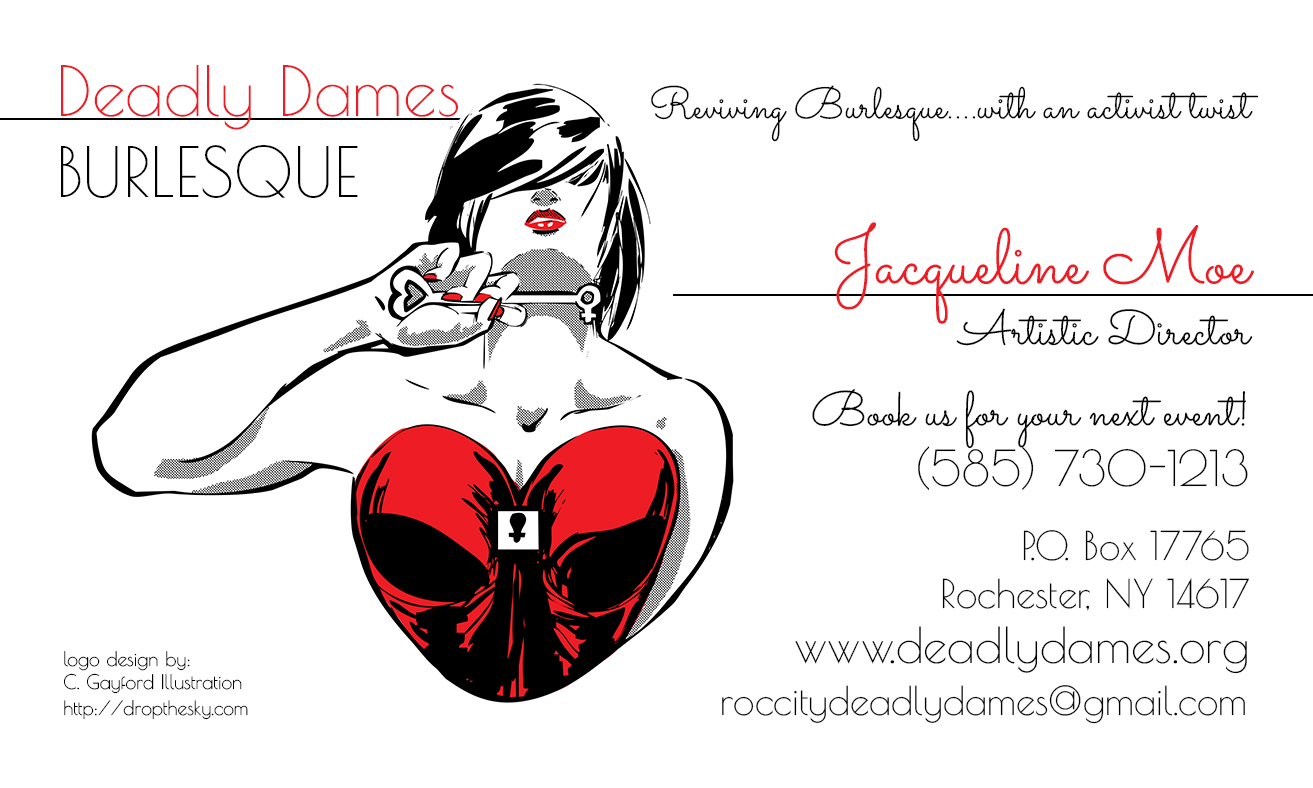
<style>
.page{position:relative;width:1313px;height:788px;background:#ffffff}
.page>*{position:absolute;margin:0}
.t1{font:68.1px "PoiretOne-Regular";color:#ee1c24}
.t2{font:68.1px "PoiretOne-Regular";color:#000000;text-transform:uppercase}
.t3{font:43.8px "Sacramento-Regular";color:#000000}
.t4{font:48.6px "Sacramento-Regular";color:#000000}
.t5{font:77.8px "Sacramento-Regular";color:#ee1c24}
.t6{font:48.6px "PoiretOne-Regular";color:#000000}
.t7{font:38.9px "PoiretOne-Regular";color:#000000}
.t8{font:19.4px "PoiretOne-Regular";color:#000000}
</style>
<div class="page">
<p class="t1" style="left:61px;top:65px;width:397px;height:133px">Deadly Dames<br><span class="t2">Burlesque</span></p>
<p class="t3" style="left:651px;top:85px;width:608px;height:57px">Reviving Burlesque....with an activist twist</p>
<p class="t4" style="left:834px;top:222px;width:420px;height:124px;text-align:right"><span class="t5">Jacqueline Moe<br></span>Artistic Director</p>
<p class="t4" style="left:812px;top:389px;width:436px;height:102px;text-align:right">Book us for your next event!<br><span class="t6">(585) 730-1213</span></p>
<p class="t7" style="left:942px;top:530px;width:307px;height:81px;text-align:right">P.O. Box 17765<br>Rochester, NY 14617</p>
<p class="t6" style="left:795px;top:626px;width:452px;height:48px">www.deadlydames.org</p>
<p class="t8" style="left:64px;top:651px;width:184px;height:69px">logo design by:<br>C. Gayford Illustration<br>http://dropthesky.com</p>
<p class="t7" style="left:722px;top:685px;width:523px;height:39px">roccitydeadlydames@gmail.com</p>
</div>
